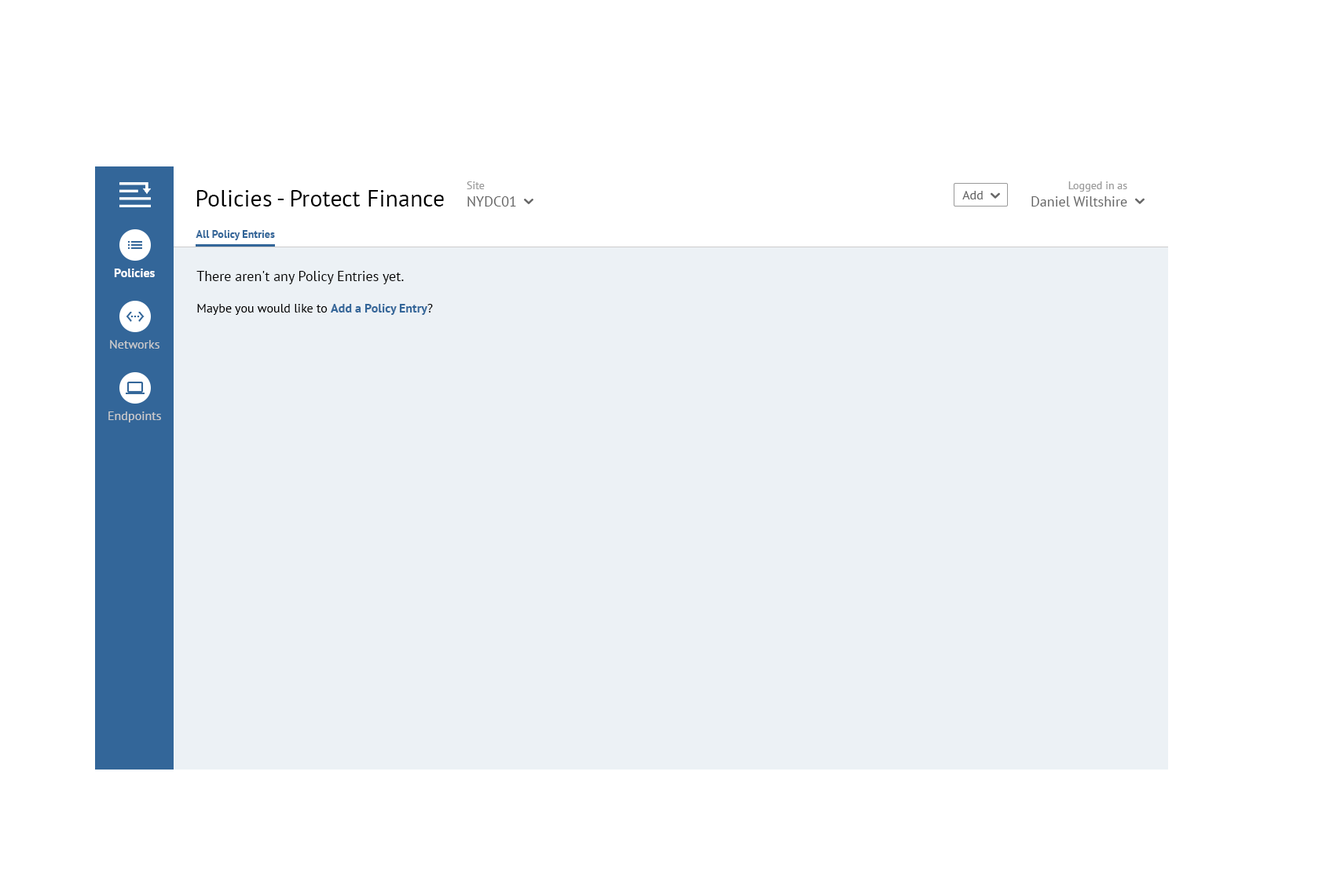
<style>
.page{position:relative;width:1337px;height:892px;background:#ffffff}
.page>*{position:absolute;margin:0}
.t1{font:14.1px "PTSans-Regular";color:#666666}
.t2{font:11px "PTSans-Regular";color:#999999}
.t3{font:14.3px "PTSans-Regular";color:#666666}
.t4{font:11.1px "PTSans-Regular";color:#999999}
.t5{font:23.6px "PTSans-Regular";color:#000000}
.t6{font:12.6px "PTSans-Regular";color:#666666}
.t7{font:10.9px "PTSans-Bold";color:#336699}
.t8{font:12.6px "PTSans-Bold";color:#ffffff}
.t9{font:14.1px "PTSans-Regular";color:#000000}
.t10{font:12.6px "PTSans-Regular";color:#000000}
.t11{font:12.6px "PTSans-Bold";color:#336699}
.t12{font:12.6px "PTSans-Regular";color:#cccccc}
</style>
<div class="page">
<p class="t1" style="left:466px;top:181px;width:50px;height:26px"><span class="t2">Site<br></span>NYDC01</p>
<p class="t3" style="left:1031px;top:181px;width:96px;height:26px;text-align:right"><span class="t4">Logged in as<br></span>Daniel Wiltshire</p>
<p class="t5" style="left:197px;top:190px;width:247px;height:17px">Policies - Protect Finance</p>
<p class="t6" style="left:962px;top:191px;width:20px;height:8px">Add</p>
<p class="t7" style="left:196px;top:230px;width:79px;height:10px">All Policy Entries</p>
<p class="t8" style="left:114px;top:269px;width:41px;height:8px">Policies</p>
<p class="t9" style="left:196px;top:271px;width:208px;height:13px">There aren't any Policy Entries yet.</p>
<p class="t10" style="left:197px;top:304px;width:236px;height:11px">Maybe you would like to <span class="t11">Add a Policy Entry</span>?</p>
<p class="t12" style="left:110px;top:340px;width:49px;height:9px">Networks</p>
<p class="t12" style="left:108px;top:412px;width:53px;height:11px">Endpoints</p>
</div>
